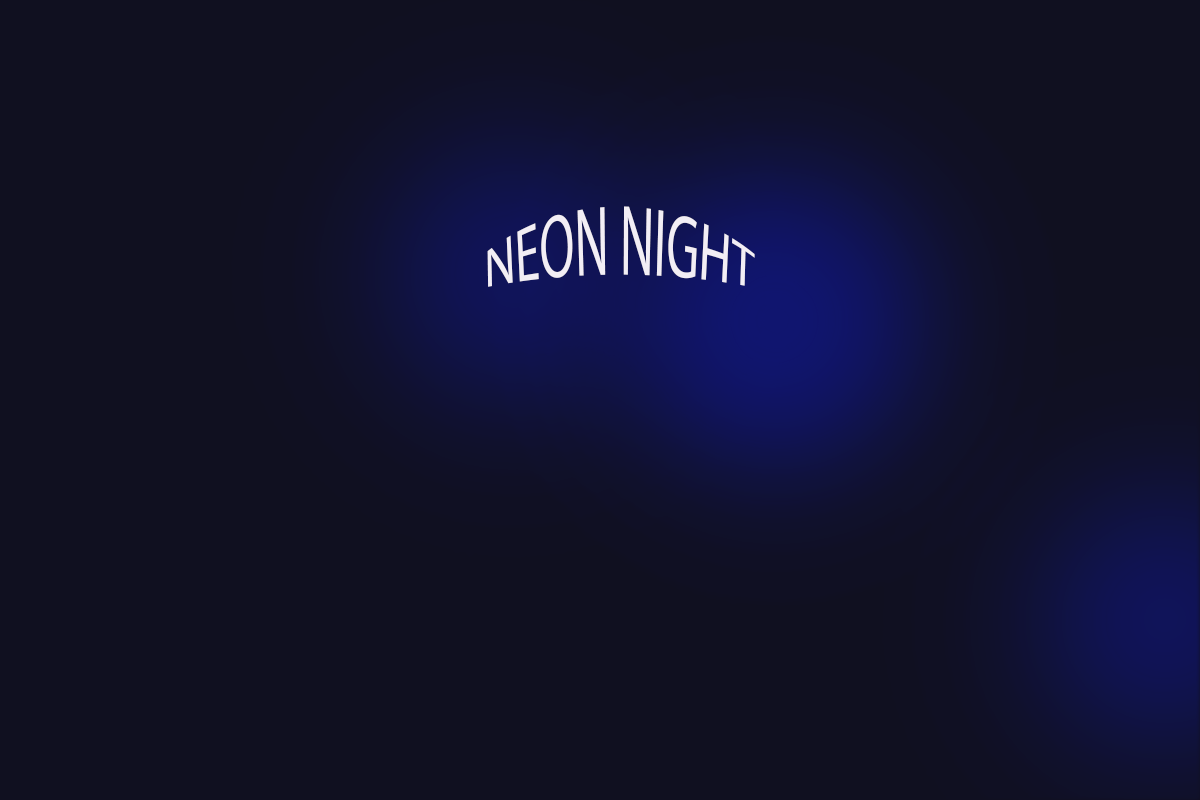
<style>
.page{position:relative;width:1200px;height:800px;background:#101020}
.page>*{position:absolute;margin:0}
.t1{font:50px "MyriadPro-Regular";color:#f2eef5}
</style>
<div class="page">
<p class="t1" style="left:487px;top:206px;width:268px;height:81px">NEON NIGHT</p>
</div>
